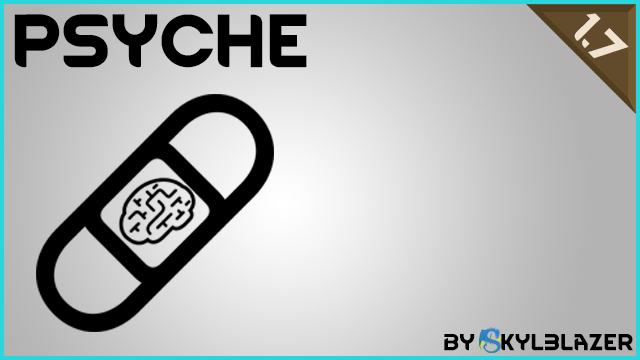
<style>
.page{position:relative;width:640px;height:360px}
.page>*{position:absolute;margin:0}
.t1{font:64px "RimWordFont";color:#000000}
.t2{font:38.9px "RimWordFont";color:#f0e3d0}
.t3{font:19.8px "RimWordFont";color:#000000}
</style>
<div class="page">
<p class="t1" style="left:14px;top:14px;width:293px;height:54px">Psyche</p>
<p class="t2" style="left:574px;top:13px;width:55px;height:46px;rotate:45deg">1.7</p>
<p class="t3" style="left:444px;top:334px;width:189px;height:17px">by   kyl3lazer</p>
</div>
